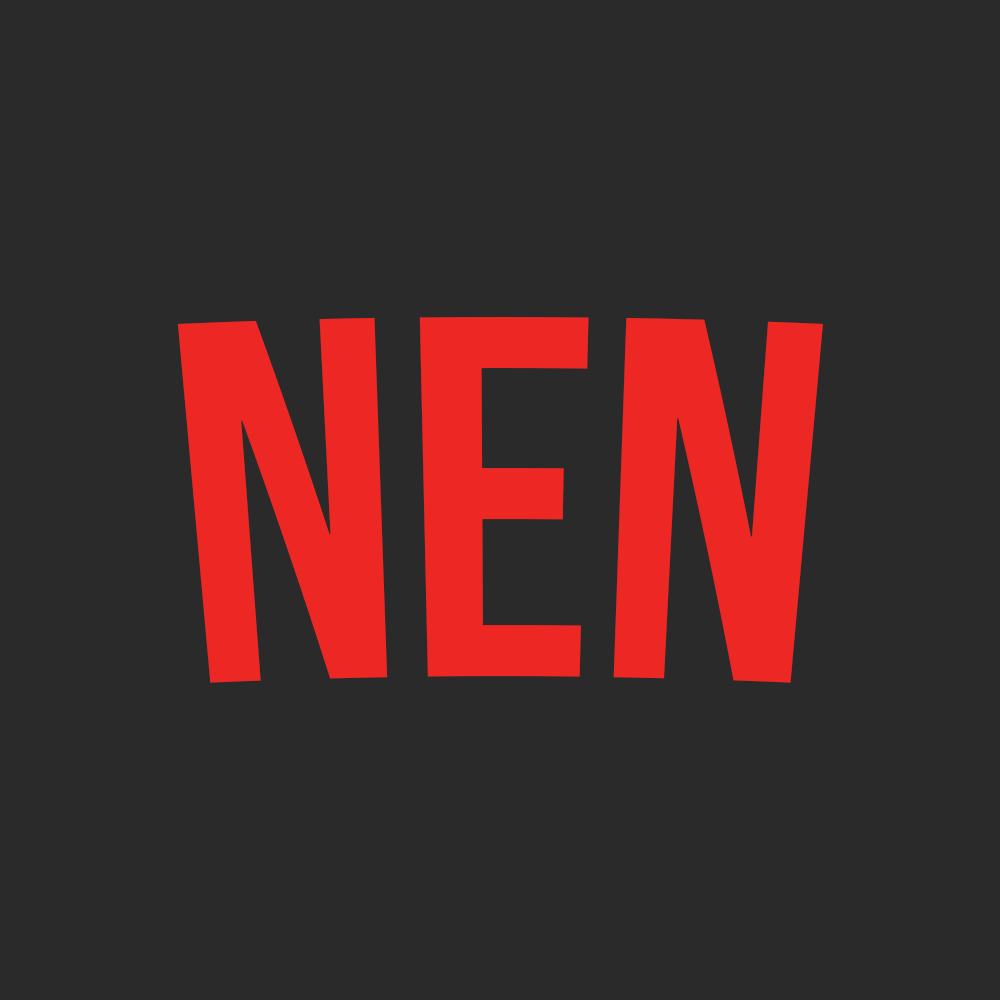
<style>
.page{position:relative;width:1000px;height:1000px;background:#2a2a2a}
.page>*{position:absolute;margin:0}
.t1{font:513.3px "BebasNeue";color:#ed2724}
</style>
<div class="page">
<p class="t1" style="left:177px;top:317px;width:646px;height:366px">NEN</p>
</div>
